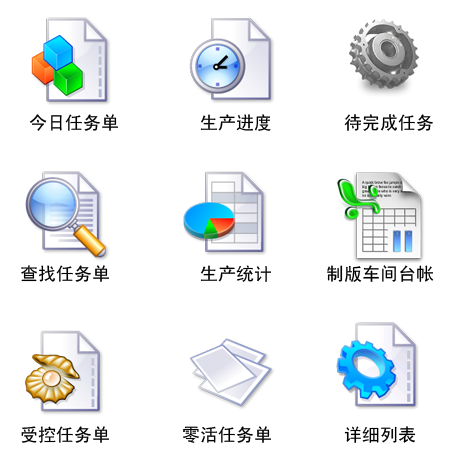
<style>
.page{position:relative;width:454px;height:454px;background:#ffffff}
.page>*{position:absolute;margin:0}
.t1{font:18px "SimHei";color:#000000}
</style>
<div class="page">
<p class="t1" style="left:21px;top:114px;width:413px;height:329px">今日任务单         生产进度        待完成任务<br><br><br><br><br><br><br>查找任务单          生产统计      制版车间台帐<br><br><br><br><br><br><br><br>受控任务单        零活任务单        详细列表</p>
</div>
